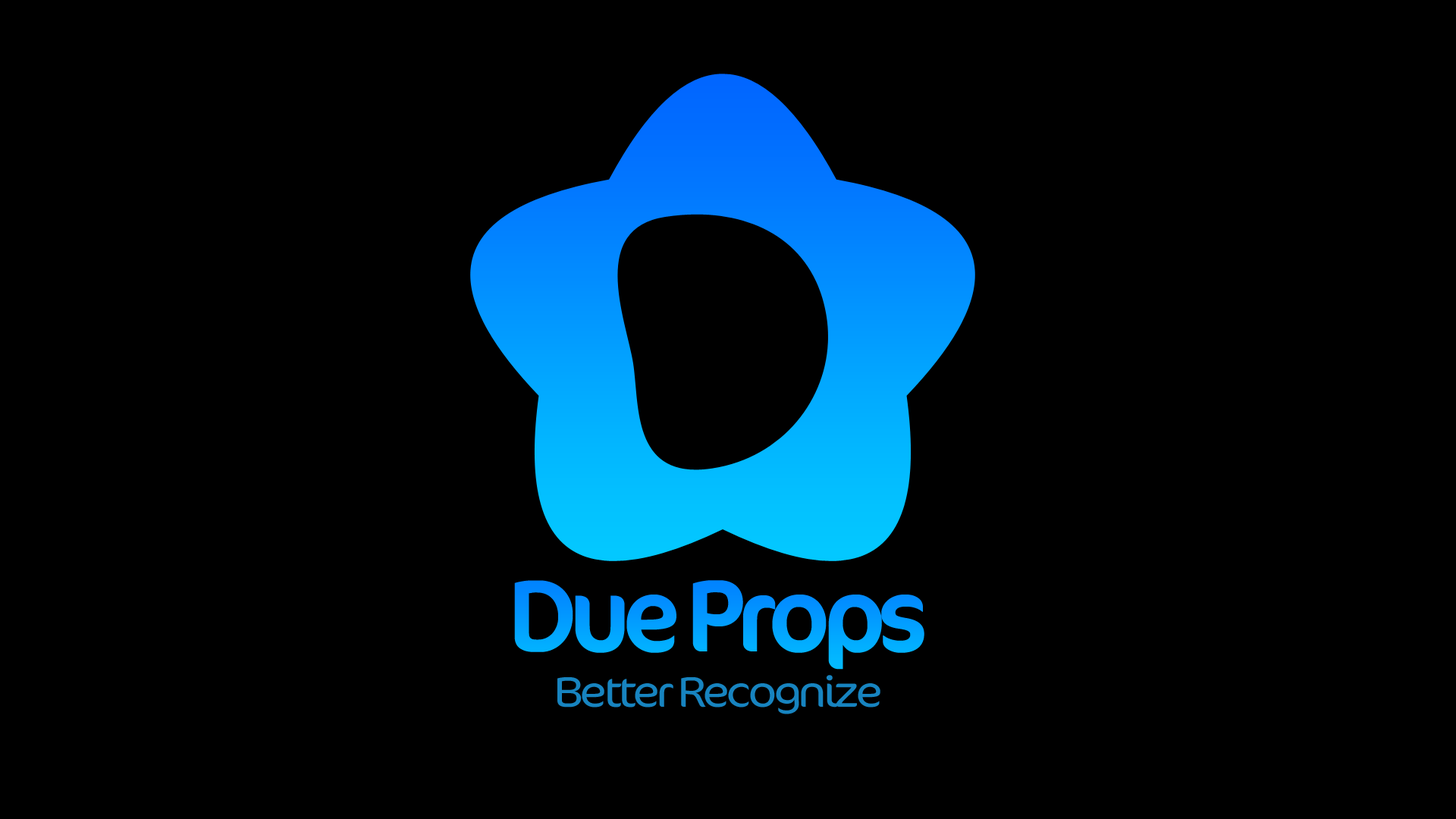
<style>
.page{position:relative;width:1456px;height:819px;background:#000000}
.page>*{position:absolute;margin:0}
.t1{font:103.1px "Cocon-Regular";letter-spacing:-0.08em;color:#029fff}
.t2{font:43.2px "Cocon-Light";letter-spacing:-0.08em;color:#1784c0;scale:1.14 1}
</style>
<div class="page">
<p class="t1" style="left:514px;top:580px;width:410px;height:90px">Due Props</p>
<p class="t2" style="left:557px;top:675px;width:323px;height:39px">Better Recognize</p>
</div>
